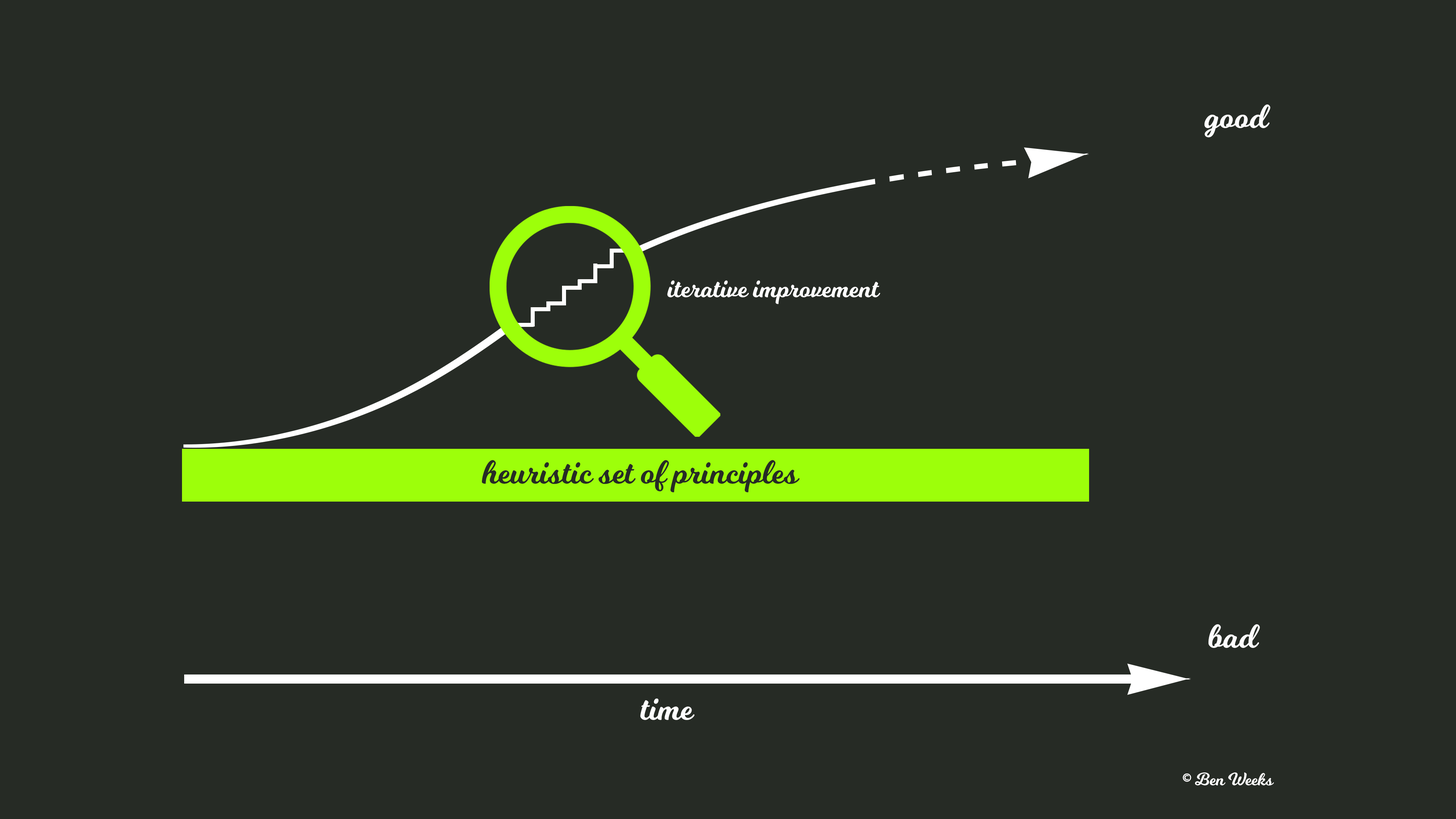
<style>
.page{position:relative;width:1456px;height:819px;background:#262b25}
.page>*{position:absolute;margin:0}
.t1{font:33.5px "Milkshake";color:#ffffff}
.t2{font:26.2px "Milkshake";color:#ffffff}
.t3{font:33.5px "Milkshake";color:#262b25}
.t4{font:17.5px "Milkshake";color:#ffffff}
</style>
<div class="page">
<p class="t1" style="left:1204px;top:104px;width:66px;height:34px">good</p>
<p class="t2" style="left:667px;top:280px;width:213px;height:24px">iterative improvement</p>
<p class="t3" style="left:482px;top:460px;width:318px;height:32px">heuristic set of principles</p>
<p class="t1" style="left:1208px;top:624px;width:52px;height:24px">bad</p>
<p class="t1" style="left:640px;top:699px;width:55px;height:21px">time</p>
<p class="t4" style="left:1183px;top:772px;width:91px;height:14px">© Ben Weeks</p>
</div>
